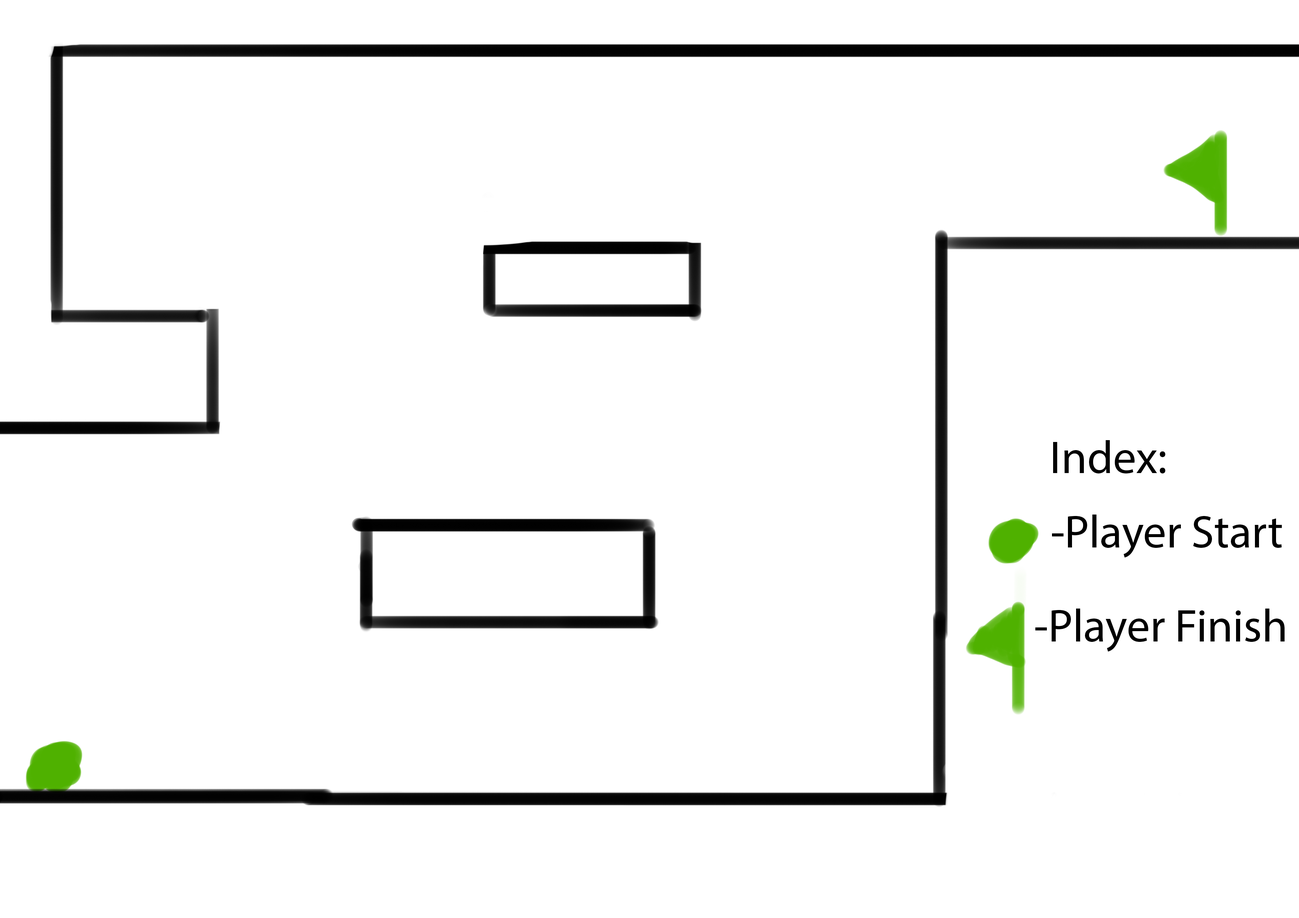
<style>
.page{position:relative;width:1299px;height:918px;background:#ffffff}
.page>*{position:absolute;margin:0}
.t1{font:46.3px "MyriadPro-Regular";color:#000000}
</style>
<div class="page">
<p class="t1" style="left:1053px;top:440px;width:112px;height:34px">Index:</p>
<p class="t1" style="left:1052px;top:515px;width:230px;height:43px">-Player Start</p>
<p class="t1" style="left:1035px;top:609px;width:249px;height:43px">-Player Finish</p>
</div>
